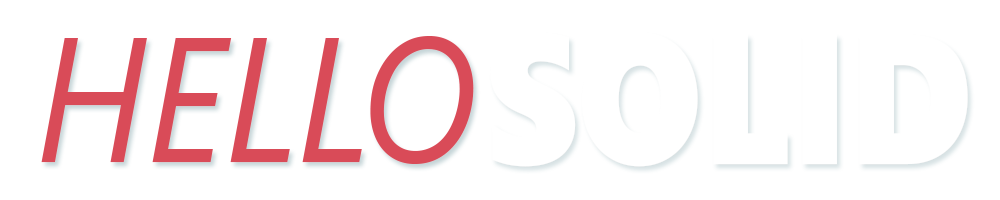
<style>
.page{position:relative;width:1000px;height:200px;background:#ffffff}
.page>*{position:absolute;margin:0}
.t1{font:177.1px "SegoeUI-Italic";color:#d94b58;scale:0.88 1}
.t2{font:185.2px "SegoeUIBlack";color:#ffffff;scale:0.88 1}
</style>
<div class="page">
<p class="t1" style="left:41px;top:36px;width:433px;height:128px">HELLO</p>
<p class="t2" style="left:490px;top:32px;width:478px;height:135px">SOLID</p>
</div>
